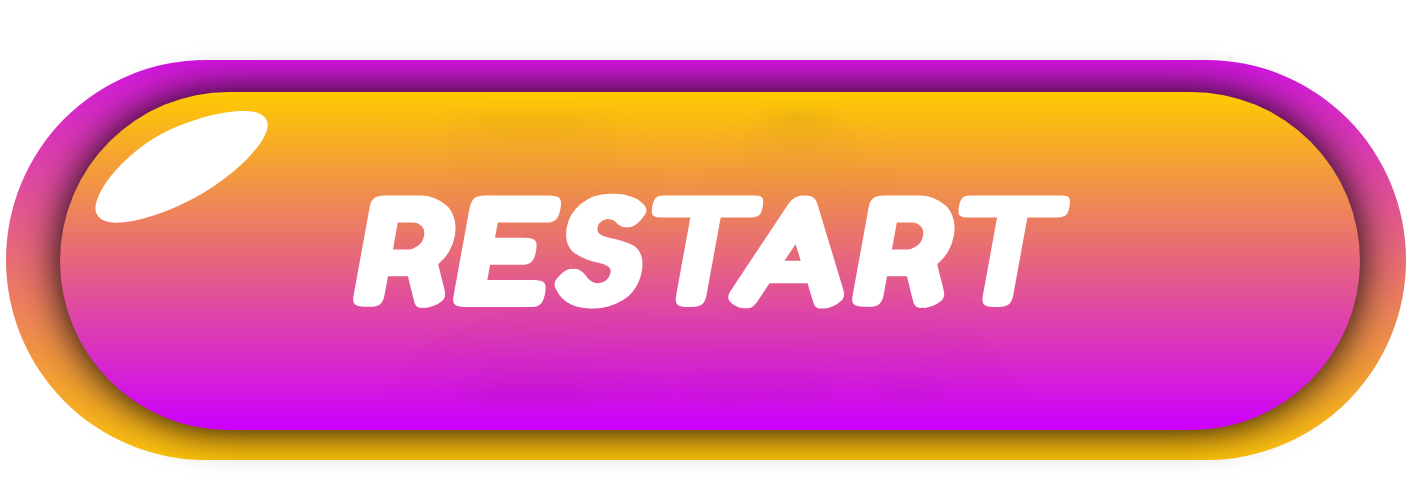
<style>
.page{position:relative;width:1420px;height:504px;background:#ffffff}
.page>*{position:absolute;margin:0}
.t1{font:152px "FredokaOne-Regular";color:#ffffff;font-weight:bold;font-style:italic}
</style>
<div class="page">
<p class="t1" style="left:353px;top:193px;width:718px;height:116px">RESTART</p>
</div>
